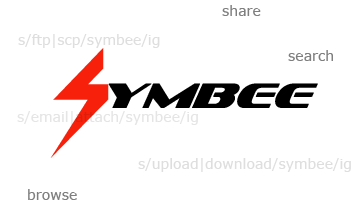
<style>
.page{position:relative;width:360px;height:216px;background:#ffffff}
.page>*{position:absolute;margin:0}
.t1{font:14px "Verdana";color:#7f7f7f}
.t2{font:14px "Verdana";color:#dedede}
.t3{font:14px "Verdana";color:#e5e5e5}
</style>
<div class="page">
<p class="t1" style="left:222px;top:5px;width:39px;height:11px">share</p>
<p class="t2" style="left:18px;top:34px;width:142px;height:14px">s/ftp|scp/symbee/ig</p>
<p class="t1" style="left:288px;top:50px;width:45px;height:11px">search</p>
<p class="t3" style="left:17px;top:111px;width:181px;height:14px">s/email|attach/symbee/ig</p>
<p class="t2" style="left:138px;top:158px;width:213px;height:14px">s/upload|download/symbee/ig</p>
<p class="t1" style="left:28px;top:189px;width:49px;height:11px">browse</p>
</div>
